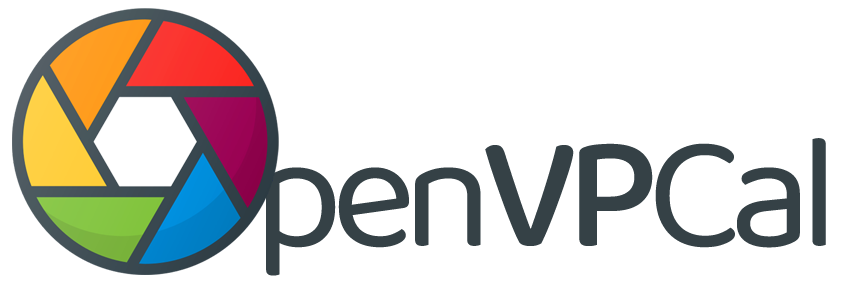
<style>
.page{position:relative;width:843px;height:288px;background:#ffffff}
.page>*{position:absolute;margin:0}
.t1{font:163px "BalooBhai2-Regular";letter-spacing:-0.075em;color:#354146}
.t2{font:163px "BalooBhai2-Medium";letter-spacing:-0.075em;color:#354146}
</style>
<div class="page">
<p class="t1" style="left:266px;top:138px;width:560px;height:138px">pen<span class="t2">VP</span>Cal</p>
</div>
